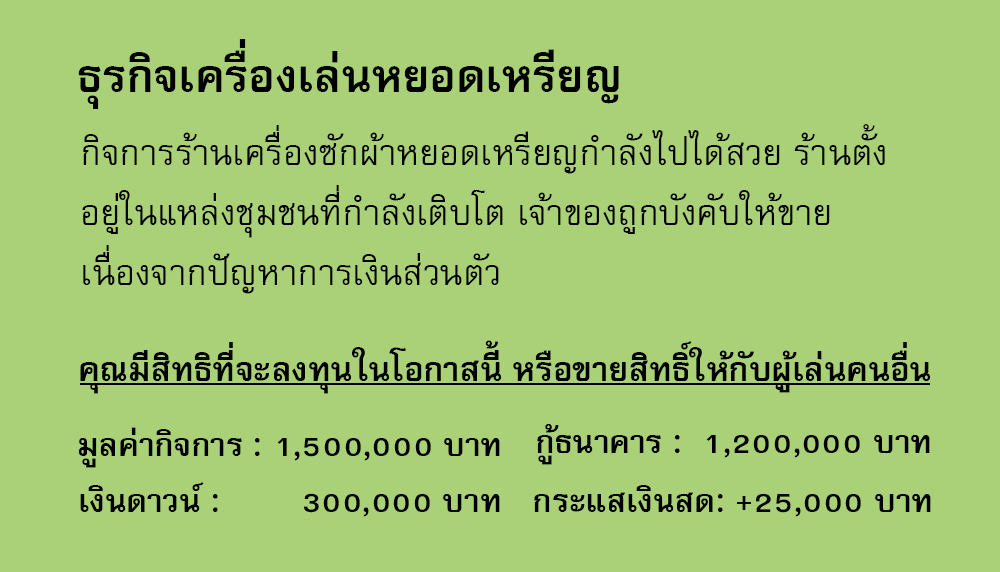
<style>
.page{position:relative;width:1000px;height:572px;background:#aad178}
.page>*{position:absolute;margin:0}
.t1{font:64px "FreesiaUPCBold";color:#000000}
.t2{font:50px/60px "FreesiaUPC";color:#000000}
.t3{font:47px "FreesiaUPCBold";color:#000000}
.t4{font:45px "FreesiaUPCBold";color:#000000}
</style>
<div class="page">
<p class="t1" style="left:78px;top:39px;width:541px;height:70px">ธุรกิจเครื่องเล่นหยอดเหรียญ</p>
<p class="t2" style="left:82px;top:124px;width:803px;height:170px">กิจการร้านเครื่องซักผ้าหยอดเหรียญกำลังไปได้สวย ร้านตั้ง<br>อยู่ในแหล่งชุมชนที่กำลังเติบโต เจ้าของถูกบังคับให้ขาย<br>เนื่องจากปัญหาการเงินส่วนตัว</p>
<p class="t3" style="left:80px;top:340px;width:851px;height:54px">คุณมีสิทธิที่จะลงทุนในโอกาสนี้ หรือขายสิทธิ์ให้กับผู้เล่นคนอื่น</p>
<p class="t4" style="left:537px;top:424px;width:393px;height:41px">กู้ธนาคาร :  1,200,000 บาท</p>
<p class="t4" style="left:78px;top:427px;width:422px;height:41px">มูลค่ากิจการ : 1,500,000 บาท</p>
<p class="t4" style="left:80px;top:481px;width:420px;height:36px">เงินดาวน์ :        300,000 บาท</p>
<p class="t4" style="left:534px;top:485px;width:397px;height:32px">กระแสเงินสด: +25,000 บาท</p>
</div>
